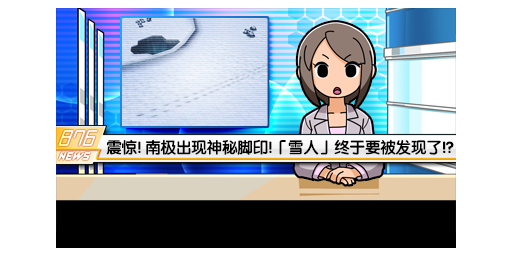
<style>
.page{position:relative;width:512px;height:256px;background:#ffffff}
.page>*{position:absolute;margin:0}
.t1{font:16px "FZY4K--GBK1-0";letter-spacing:-0.04em;color:#000000}
</style>
<div class="page">
<p class="t1" style="left:106px;top:139px;width:348px;height:16px">震惊! 南极出现神秘脚印!「雪人」终于要被发现了!?</p>
</div>
